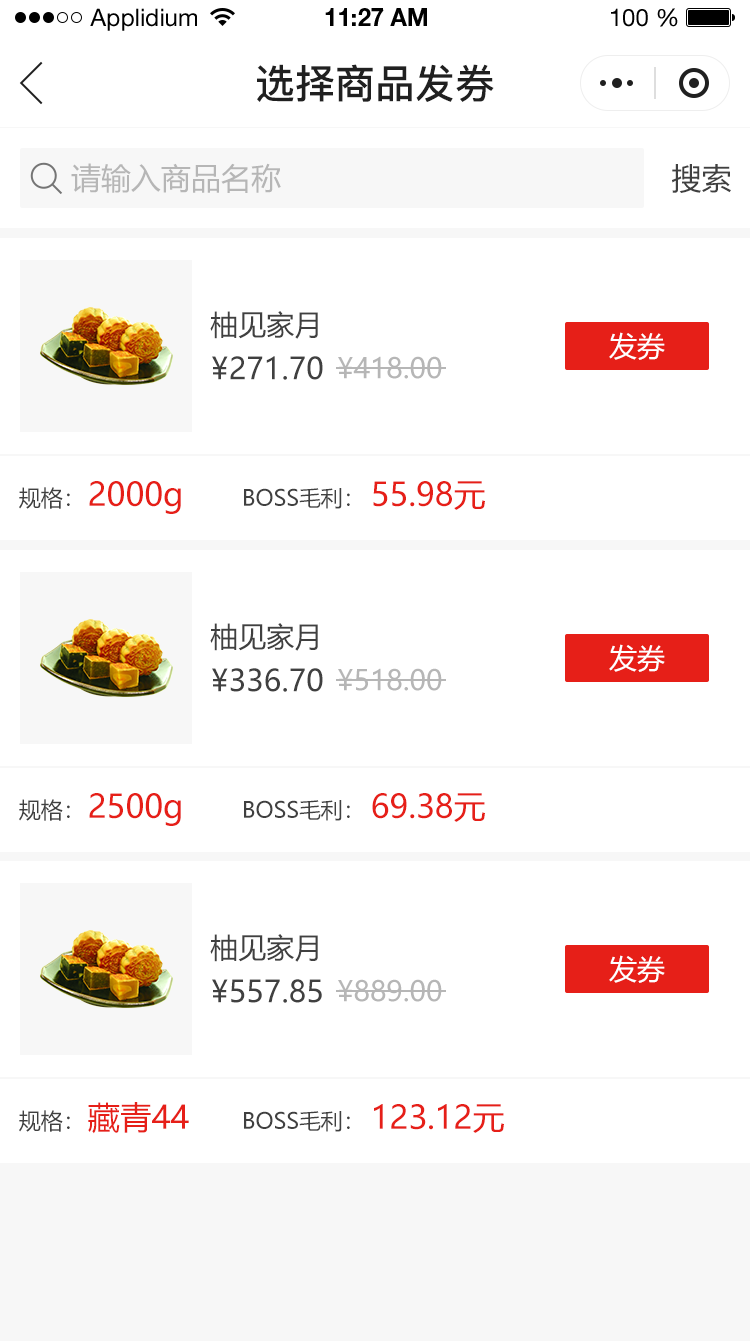
<style>
.page{position:relative;width:750px;height:1341px;background:#ffffff}
.page>*{position:absolute;margin:0}
.t1{font:24px "HelveticaNeueLTStd-Roman";color:#000000}
.t2{font:24px "HelveticaNeueLTStd-Bd";color:#000000}
.t3{font:40px "PingFang-SC-Bold";color:#202020;text-transform:uppercase}
.t4{font:30px "MicrosoftYaHei";color:#b6b6b6;text-transform:uppercase}
.t5{font:30px "MicrosoftYaHei";color:#404040;text-transform:uppercase}
.t6{font:28px "MicrosoftYaHei";color:#404040;text-transform:uppercase}
.t7{font:28px "MicrosoftYaHei";color:#ffffff;text-transform:uppercase}
.t8{font:28px "MicrosoftYaHei";color:#b6b6b6;text-transform:uppercase}
.t9{font:32px "MicrosoftYaHei";color:#e61f18;text-transform:uppercase}
.t10{font:32px "MicrosoftYaHei";color:#e61f18}
.t11{font:22px "MicrosoftYaHei";color:#404040;text-transform:uppercase}
</style>
<div class="page">
<p class="t1" style="left:90px;top:8px;width:107px;height:23px">Applidium</p>
<p class="t2" style="left:325px;top:8px;width:102px;height:18px">11:27 AM</p>
<p class="t1" style="left:611px;top:8px;width:67px;height:19px">100 %</p>
<p class="t3" style="left:257px;top:64px;width:237px;height:38px">选择商品发券</p>
<p class="t4" style="left:71px;top:163px;width:210px;height:30px">请输入商品名称</p>
<p class="t5" style="left:672px;top:164px;width:59px;height:29px">搜索</p>
<p class="t6" style="left:210px;top:311px;width:108px;height:28px">柚见家月</p>
<p class="t7" style="left:609px;top:332px;width:56px;height:28px">发券</p>
<p class="t5" style="left:212px;top:356px;width:111px;height:24px">¥271.70</p>
<p class="t8" style="left:338px;top:356px;width:104px;height:23px">¥418.00</p>
<p class="t9" style="left:89px;top:481px;width:92px;height:33px">2000<span class="t10">g</span></p>
<p class="t9" style="left:373px;top:481px;width:112px;height:29px">55.98元</p>
<p class="t11" style="left:19px;top:487px;width:51px;height:22px">规格：</p>
<p class="t11" style="left:244px;top:488px;width:106px;height:21px">boss毛利：</p>
<p class="t6" style="left:210px;top:623px;width:108px;height:28px">柚见家月</p>
<p class="t7" style="left:609px;top:644px;width:56px;height:28px">发券</p>
<p class="t5" style="left:212px;top:668px;width:111px;height:24px">¥336.70</p>
<p class="t8" style="left:338px;top:668px;width:104px;height:23px">¥518.00</p>
<p class="t9" style="left:89px;top:793px;width:92px;height:33px">2500<span class="t10">g</span></p>
<p class="t9" style="left:372px;top:793px;width:113px;height:29px">69.38元</p>
<p class="t11" style="left:19px;top:799px;width:51px;height:22px">规格：</p>
<p class="t11" style="left:244px;top:800px;width:106px;height:21px">boss毛利：</p>
<p class="t6" style="left:210px;top:934px;width:108px;height:28px">柚见家月</p>
<p class="t7" style="left:609px;top:955px;width:56px;height:28px">发券</p>
<p class="t5" style="left:212px;top:979px;width:110px;height:24px">¥557.85</p>
<p class="t8" style="left:338px;top:979px;width:104px;height:23px">¥889.00</p>
<p class="t11" style="left:19px;top:1110px;width:51px;height:22px">规格：</p>
<p class="t9" style="left:88px;top:1102px;width:101px;height:32px">藏青44</p>
<p class="t9" style="left:374px;top:1104px;width:130px;height:29px">123.12元</p>
<p class="t11" style="left:244px;top:1111px;width:106px;height:21px">boss毛利：</p>
</div>
